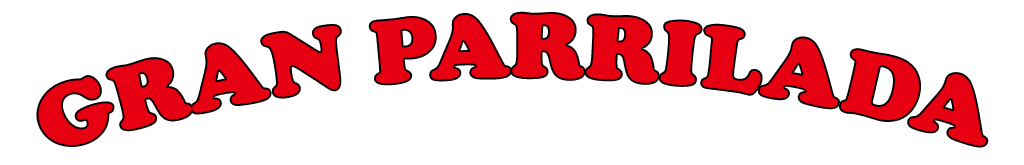
<style>
.page{position:relative;width:1024px;height:165px;background:#ffffff}
.page>*{position:absolute;margin:0}
.t1{font:92.2px "CooperBlack";letter-spacing:0.006em;color:#e60012}
</style>
<div class="page">
<p class="t1" style="left:38px;top:13px;width:949px;height:133px">GRAN PARRILADA</p>
</div>
